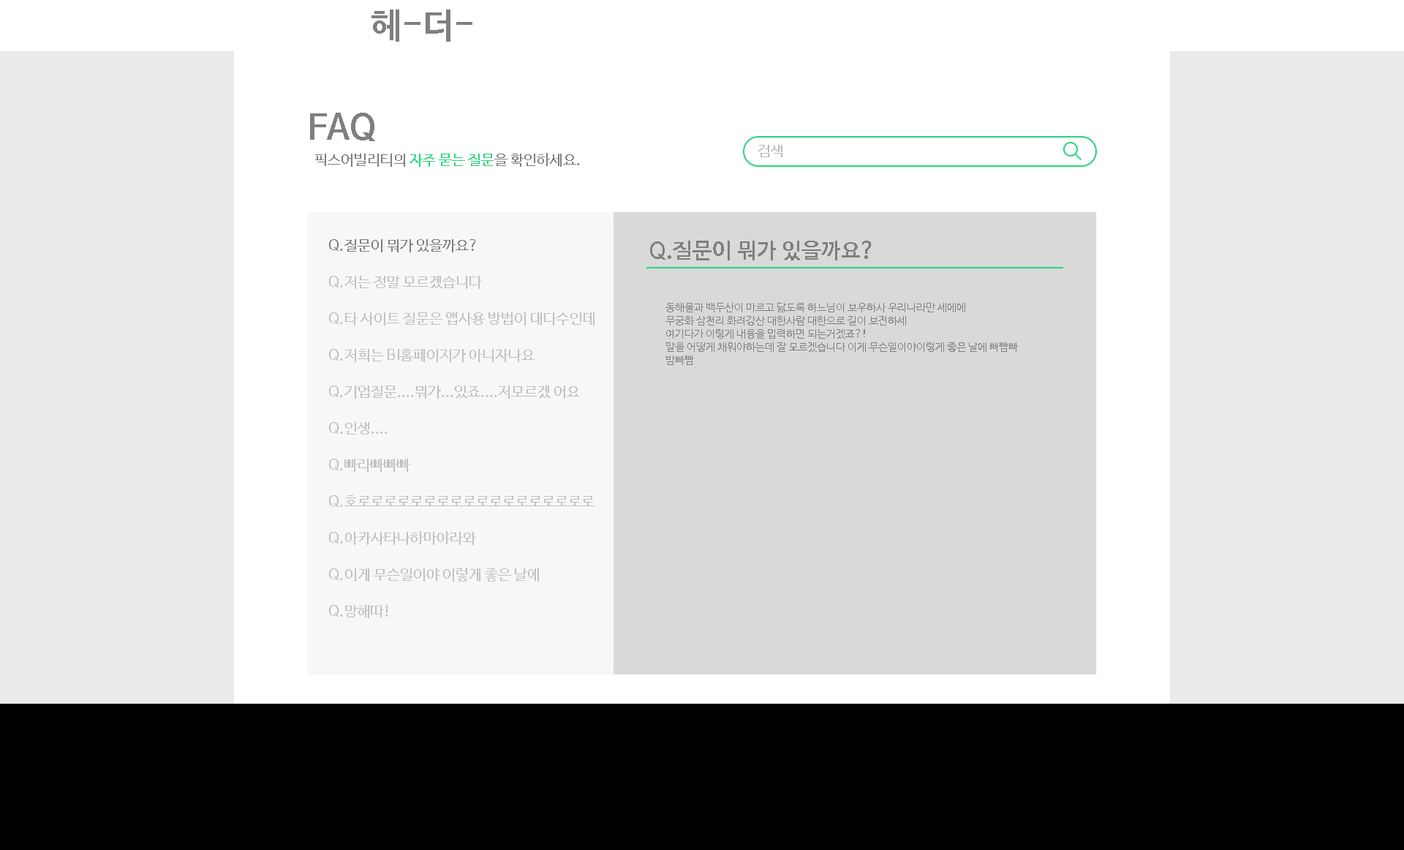
<style>
.page{position:relative;width:1404px;height:850px;background:#eaeaea}
.page>*{position:absolute;margin:0}
.t1{font:35.1px "NanumBarunGothicBold";color:#7f7f7f}
.t2{font:14.6px "NanumBarunGothic";color:#bbbbbb}
.t3{font:14.6px "NanumBarunGothic";color:#28d47c}
.t4{font:14.6px "NanumBarunGothic";color:#7f7f7f}
.t5{font:21.9px "NanumBarunGothicBold";color:#7f7f7f}
.t6{font:14.6px "NanumBarunGothic";color:#c1c1c1}
.t7{font:11px "NanumBarunGothic";color:#7f7f7f}
</style>
<div class="page">
<p class="t1" style="left:371px;top:10px;width:101px;height:32px">헤-더-</p>
<p class="t1" style="left:310px;top:113px;width:65px;height:28px">FAQ</p>
<p class="t2" style="left:758px;top:145px;width:24px;height:12px">검색</p>
<p class="t3" style="left:315px;top:153px;width:264px;height:14px"><span class="t4">픽스어빌리티의 </span>자주 묻는 질문<span class="t4">을 확인하세요.</span></p>
<p class="t4" style="left:329px;top:239px;width:13px;height:12px">Q.</p>
<p class="t4" style="left:344px;top:239px;width:131px;height:13px">질문이 뭐가 있을까요?</p>
<p class="t5" style="left:650px;top:241px;width:21px;height:19px">Q.</p>
<p class="t5" style="left:673px;top:241px;width:198px;height:20px">질문이 뭐가 있을까요?</p>
<p class="t6" style="left:329px;top:276px;width:13px;height:11px">Q.</p>
<p class="t6" style="left:344px;top:276px;width:138px;height:13px">저는 정말 모르겠습니다</p>
<p class="t7" style="left:665px;top:303px;width:353px;height:62px">동해물과 백두산이 마르고 닳도록 하느님이 보우하사 우리나라만 세에에<br>무궁화 삼천리 화려강산 대한사람 대한으로 길이 보전하세<br>여기다가 이렇게 내용을 입력하면 되는거겠죠?! <br>말을 어떻게 채워야하는데 잘 모르겠습니다 이게 무슨일이야이렇게 좋은 날에 빠빰빠<br>밤빠빰</p>
<p class="t6" style="left:329px;top:312px;width:13px;height:12px">Q.</p>
<p class="t6" style="left:345px;top:311px;width:249px;height:14px">타 사이트 질문은 앱사용 방법이 대다수인데</p>
<p class="t6" style="left:329px;top:349px;width:13px;height:11px">Q.</p>
<p class="t6" style="left:344px;top:349px;width:190px;height:13px">저희는 BI홈페이지가 아니자나요</p>
<p class="t6" style="left:329px;top:385px;width:13px;height:12px">Q.</p>
<p class="t6" style="left:344px;top:385px;width:236px;height:13px">기업질문....뭐가...있죠....저모르겠 어요</p>
<p class="t6" style="left:329px;top:422px;width:13px;height:12px">Q.</p>
<p class="t6" style="left:345px;top:422px;width:42px;height:12px">인생....</p>
<p class="t6" style="left:329px;top:458px;width:13px;height:12px">Q.</p>
<p class="t6" style="left:344px;top:458px;width:66px;height:14px">빠라빠빠빠</p>
<p class="t6" style="left:329px;top:495px;width:13px;height:12px">Q.</p>
<p class="t6" style="left:344px;top:495px;width:250px;height:11px">호로로로로로로로로로로로로로로로로로로</p>
<p class="t6" style="left:329px;top:531px;width:13px;height:12px">Q.</p>
<p class="t6" style="left:345px;top:531px;width:131px;height:14px">아카사타나하마야라와</p>
<p class="t6" style="left:329px;top:568px;width:13px;height:12px">Q.</p>
<p class="t6" style="left:345px;top:567px;width:194px;height:14px">이게 무슨일이야 이렇게 좋은 날에</p>
<p class="t6" style="left:329px;top:605px;width:13px;height:11px">Q.</p>
<p class="t6" style="left:345px;top:605px;width:42px;height:13px">망해따!</p>
</div>
